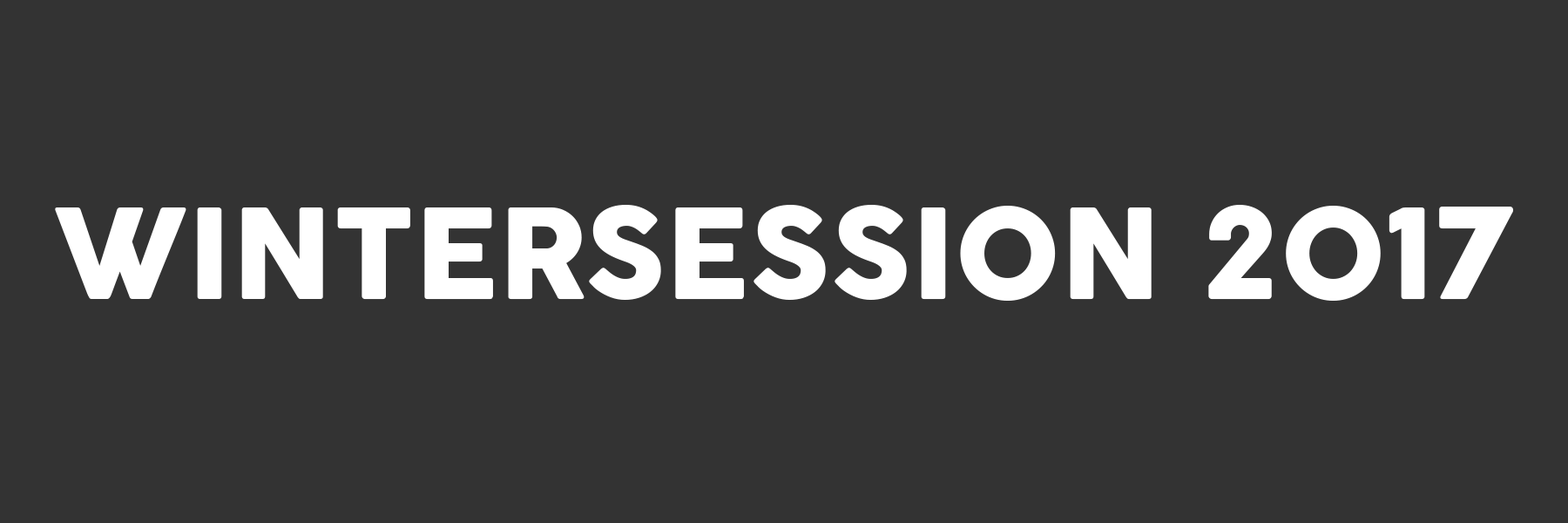
<style>
.page{position:relative;width:1568px;height:523px;background:#333333}
.page>*{position:absolute;margin:0}
.t1{font:123.4px "COCOGOOSE";color:#ffffff}
</style>
<div class="page">
<p class="t1" style="left:55px;top:205px;width:1459px;height:96px">WINTERSESSION 2017</p>
</div>
